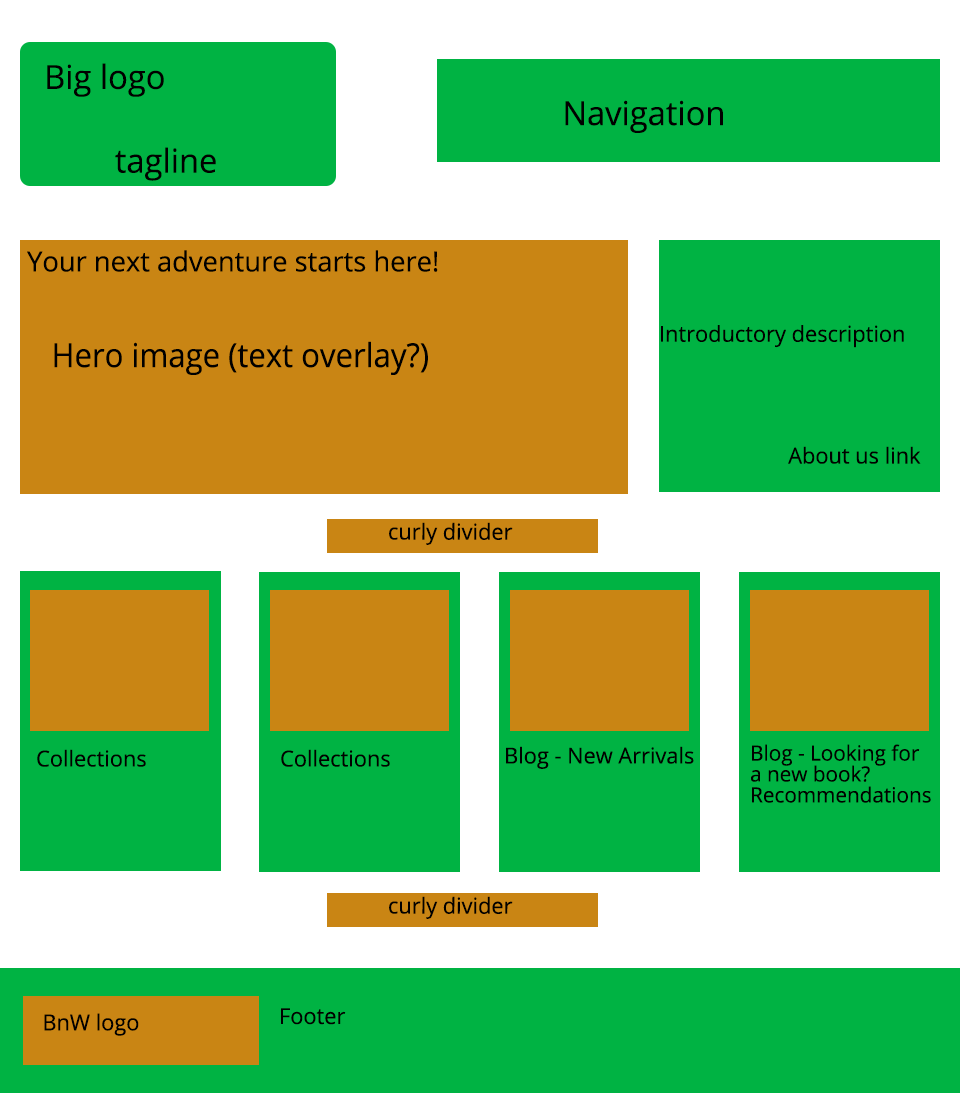
<style>
.page{position:relative;width:960px;height:1093px;background:#00b343}
.page>*{position:absolute;margin:0}
.t1{font:33px "OpenSans";color:#000000}
.t2{font:27.6px "OpenSans";color:#000000}
.t3{font:22px "OpenSans";color:#000000}
.t4{font:33px "OpenSans";color:#000000;scale:0.94 1}
.t5{font:20.9px/20.9px "OpenSans";color:#000000}
</style>
<div class="page">
<p class="t1" style="left:47px;top:63px;width:117px;height:34px">Big logo</p>
<p class="t1" style="left:565px;top:100px;width:158px;height:33px">Navigation</p>
<p class="t1" style="left:115px;top:147px;width:101px;height:34px">tagline</p>
<p class="t2" style="left:27px;top:250px;width:411px;height:22px">Your next adventure starts here!</p>
<p class="t3" style="left:661px;top:325px;width:243px;height:23px">Introductory description</p>
<p class="t4" style="left:54px;top:341px;width:374px;height:34px">Hero image (text overlay?)</p>
<p class="t3" style="left:788px;top:446px;width:133px;height:18px">About us link</p>
<p class="t3" style="left:389px;top:522px;width:124px;height:23px">curly divider</p>
<p class="t3" style="left:37px;top:749px;width:109px;height:18px">Collections</p>
<p class="t3" style="left:281px;top:749px;width:109px;height:18px">Collections</p>
<p class="t3" style="left:506px;top:746px;width:188px;height:23px">Blog - New Arrivals</p>
<p class="t5" style="left:751px;top:744px;width:180px;height:59px">Blog - Looking for <br>a new book? <br>Recommendations</p>
<p class="t3" style="left:389px;top:896px;width:124px;height:23px">curly divider</p>
<p class="t3" style="left:44px;top:1013px;width:95px;height:23px">BnW logo</p>
<p class="t3" style="left:281px;top:1008px;width:65px;height:17px">Footer</p>
</div>
